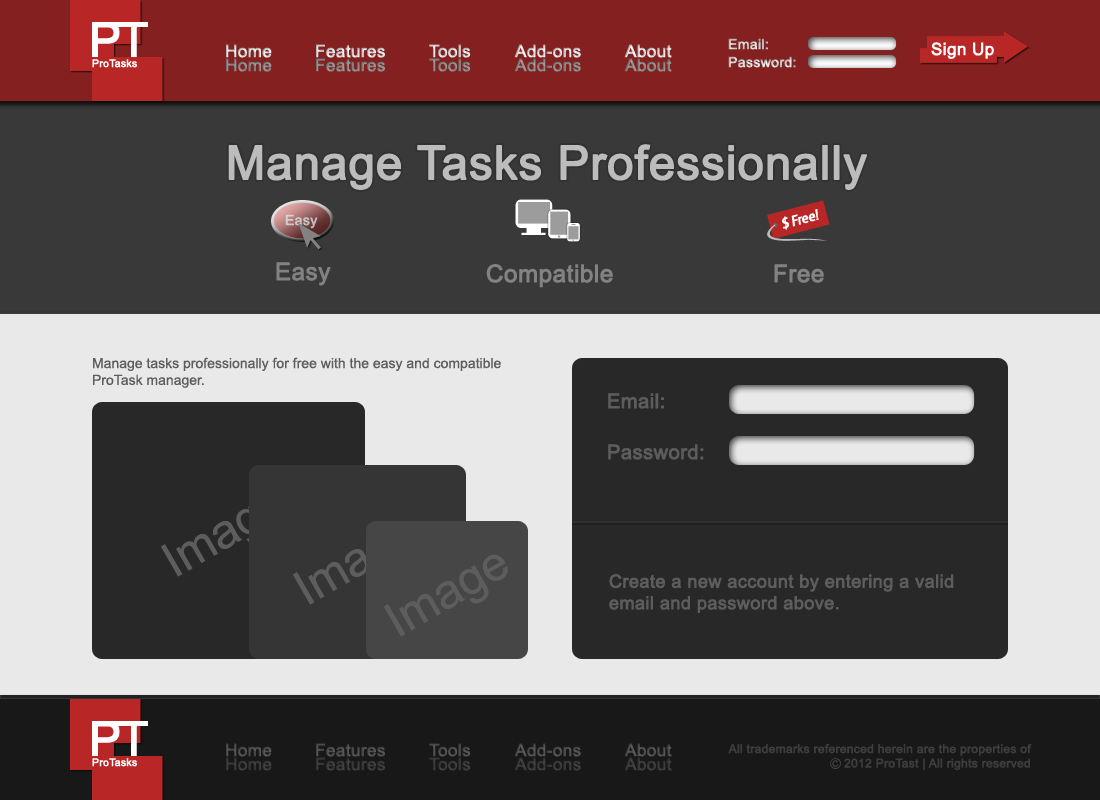
<style>
.page{position:relative;width:1100px;height:800px;background:#e9e9e9}
.page>*{position:absolute;margin:0}
.t1{font:14px "ArialMT";color:#c6c6c6;font-weight:bold}
.t2{font:17px "ArialMT";font-weight:bold}
.t3{font:17px "ArialMT";color:#ffffff;font-weight:bold}
.t4{font:10.5px "ArialMT";color:#ffffff;font-weight:bold}
.t5{font:17px "ArialMT";color:#888888;font-weight:bold}
.t6{font:17px "ArialMT";color:#878787;font-weight:bold}
.t7{font:17px "ArialMT";color:#868686;font-weight:bold}
.t8{font:17px "ArialMT";color:#898989;font-weight:bold}
.t9{font:14px "ArialMT";color:#d3d3d3;font-weight:bold}
.t10{font:47px "ArialMT";color:#bcbcbc;font-weight:bold}
.t11{font:14px "GouditaSansSFItalic";color:#ffffff;font-weight:bold}
.t12{font:24px "ArialMT";color:#828282;font-weight:bold}
.t13{font:14px "ArialMT";color:#5d5d5d}
.t14{font:20px "ArialMT";color:#5d5d5d;font-weight:bold}
.t15{font:48px "ArialMT";color:#5d5d5d}
.t16{font:18px "ArialMT";color:#5d5d5d;font-weight:bold}
.t17{font:17px "ArialMT";color:#4e4e4e;font-weight:bold}
.t18{font:17px "ArialMT";color:#4d4d4d;font-weight:bold}
.t19{font:17px "ArialMT";color:#4f4f4f;font-weight:bold}
.t20{font:12px "ArialMT";color:#3d3d3d;font-weight:bold}
.t21{font:17px "ArialMT";color:#3a3a3a;font-weight:bold}
.t22{font:17px "ArialMT";color:#393939;font-weight:bold}
.t23{font:17px "ArialMT";color:#3b3b3b;font-weight:bold}
</style>
<div class="page">
<p class="t1" style="left:728px;top:38px;width:40px;height:12px">Email:</p>
<p class="t2" style="left:226px;top:44px;width:46px;height:14px">Home</p>
<p class="t2" style="left:316px;top:44px;width:69px;height:14px">Features</p>
<p class="t2" style="left:429px;top:44px;width:42px;height:14px">Tools</p>
<p class="t2" style="left:514px;top:44px;width:67px;height:14px">Add-ons</p>
<p class="t2" style="left:624px;top:44px;width:48px;height:14px">About</p>
<p class="t3" style="left:931px;top:42px;width:63px;height:17px">Sign Up</p>
<p class="t4" style="left:92px;top:59px;width:45px;height:9px">ProTasks</p>
<p class="t5" style="left:226px;top:58px;width:46px;height:14px">Home</p>
<p class="t6" style="left:316px;top:58px;width:69px;height:14px">Features</p>
<p class="t7" style="left:429px;top:58px;width:42px;height:14px">Tools</p>
<p class="t8" style="left:514px;top:58px;width:67px;height:14px">Add-ons</p>
<p class="t5" style="left:624px;top:58px;width:48px;height:14px">About</p>
<p class="t9" style="left:728px;top:56px;width:68px;height:12px">Password:</p>
<p class="t10" style="left:228px;top:144px;width:639px;height:46px">Manage Tasks Professionally</p>
<p class="t11" style="left:791px;top:209px;width:28px;height:18px;rotate:-15deg">Free!</p>
<p class="t1" style="left:285px;top:214px;width:33px;height:15px">Easy</p>
<p class="t11" style="left:782px;top:216px;width:7px;height:14px;rotate:-15deg">$</p>
<p class="t12" style="left:276px;top:262px;width:55px;height:24px">Easy</p>
<p class="t12" style="left:486px;top:264px;width:127px;height:24px">Compatible</p>
<p class="t12" style="left:774px;top:264px;width:50px;height:19px">Free</p>
<p class="t13" style="left:93px;top:357px;width:408px;height:31px">Manage tasks professionally for free with the easy and compatible<br>ProTask manager.</p>
<p class="t14" style="left:608px;top:393px;width:56px;height:16px">Email:</p>
<p class="t14" style="left:608px;top:444px;width:96px;height:16px">Password:</p>
<p class="t15" style="left:161px;top:494px;width:124px;height:83px;rotate:-30deg">Image</p>
<p class="t15" style="left:293px;top:522px;width:124px;height:83px;rotate:-30deg">Image</p>
<p class="t15" style="left:384px;top:554px;width:124px;height:83px;rotate:-30deg">Image</p>
<p class="t16" style="left:609px;top:574px;width:345px;height:39px">Create a new account by entering a valid email and password above.</p>
<p class="t17" style="left:226px;top:743px;width:46px;height:14px">Home</p>
<p class="t17" style="left:316px;top:743px;width:69px;height:14px">Features</p>
<p class="t18" style="left:429px;top:743px;width:42px;height:14px">Tools</p>
<p class="t19" style="left:514px;top:743px;width:67px;height:14px">Add-ons</p>
<p class="t19" style="left:624px;top:743px;width:48px;height:14px">About</p>
<p class="t20" style="left:728px;top:744px;width:304px;height:27px;text-align:right">All trademarks referenced herein are the properties of<br>2012 ProTast | All rights reserved</p>
<p class="t4" style="left:92px;top:758px;width:45px;height:9px">ProTasks</p>
<p class="t21" style="left:226px;top:757px;width:46px;height:14px">Home</p>
<p class="t21" style="left:316px;top:757px;width:69px;height:14px">Features</p>
<p class="t22" style="left:429px;top:757px;width:42px;height:14px">Tools</p>
<p class="t23" style="left:514px;top:757px;width:67px;height:14px">Add-ons</p>
<p class="t21" style="left:624px;top:757px;width:48px;height:14px">About</p>
</div>
